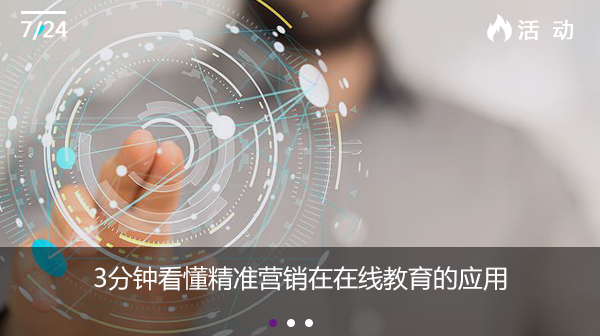
<style>
.page{position:relative;width:600px;height:336px}
.page>*{position:absolute;margin:0}
.t1{font:20.8px "MicrosoftYaHei";color:#ffffff;font-weight:bold}
.t2{font:25px "MicrosoftYaHei";color:#ffffff}
</style>
<div class="page">
<p class="t1" style="left:21px;top:21px;width:47px;height:19px">7/24</p>
<p class="t1" style="left:518px;top:19px;width:55px;height:21px">活  动</p>
<p class="t2" style="left:94px;top:266px;width:413px;height:25px">3分钟看懂精准营销在在线教育的应用</p>
</div>
